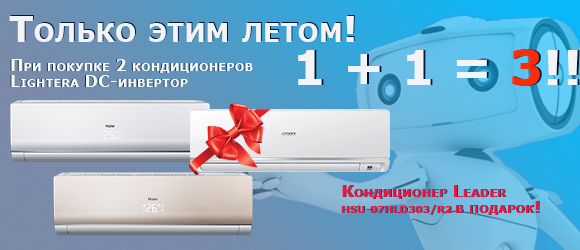
<style>
.page{position:relative;width:580px;height:250px}
.page>*{position:absolute;margin:0}
.t1{font:36px "Verdana-Bold";color:#f2f4f8;font-variant:small-caps}
.t2{font:16px/16px "Verdana-Bold";font-variant:small-caps}
.t3{font:16px/16px "Verdana-Bold";color:#f9fbfc;font-variant:small-caps}
.t4{font:16px/16px "Verdana-Bold";color:#f31343;font-variant:small-caps}
.t5{font:10px/16px "Verdana-Bold";color:#f31343;font-variant:small-caps}
.t6{font:10px/16px "Verdana-Bold";font-variant:small-caps}
</style>
<div class="page">
<p class="t1" style="left:9px;top:16px;width:345px;height:26px">Только этим летом!</p>
<p class="t1" style="left:10px;top:15px;width:345px;height:26px">Только этим летом!</p>
<p class="t2" style="left:10px;top:59px;width:242px;height:28px">При покупке 2 кондиционеров Lightera DC-инвертор</p>
<p class="t3" style="left:11px;top:59px;width:242px;height:28px">При покупке 2 кондиционеров Lightera DC-инвертор</p>
<p class="t4" style="left:341px;top:185px;width:198px;height:30px">Кондиционер Leader <span class="t5">HSU-07HLD303/R2 </span>в подарок!</p>
<p class="t2" style="left:342px;top:185px;width:198px;height:30px">Кондиционер Leader <span class="t6">HSU-07HLD303/R2 </span>в подарок!</p>
</div>
